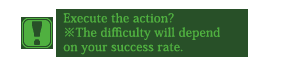
<style>
.page{position:relative;width:296px;height:73px;background:#ffffff}
.page>*{position:absolute;margin:0}
.t1{font:9px "KozMinPro-Medium";letter-spacing:0.025em;color:#50b040}
</style>
<div class="page">
<p class="t1" style="left:63px;top:13px;width:157px;height:42px">Execute the action?<br>※The difficulty will depend<br>on your success rate.</p>
</div>
